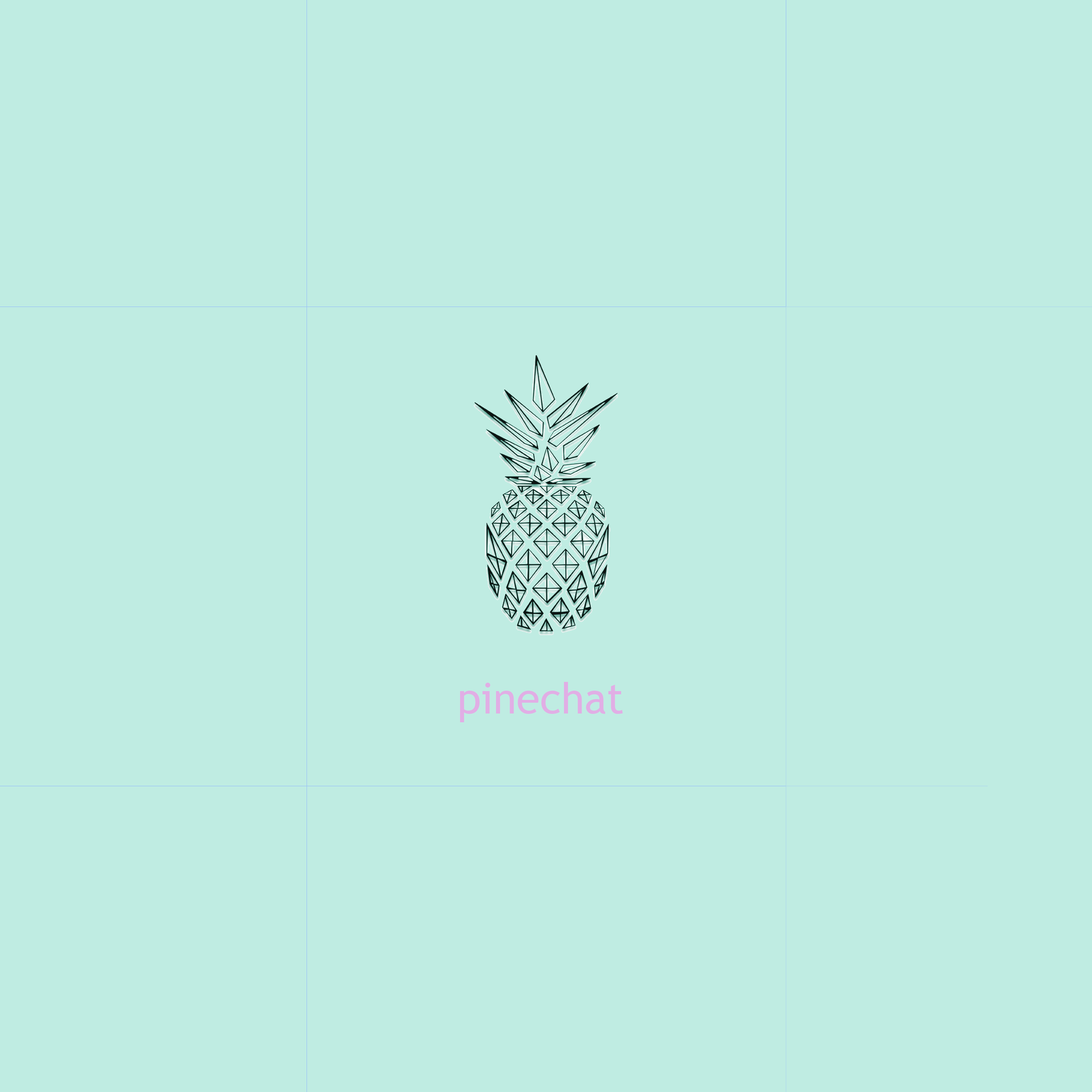
<style>
.page{position:relative;width:1092px;height:1092px;background:#bfece2}
.page>*{position:absolute;margin:0}
.t1{font:42.8px "TrebuchetMS";color:#e1aee5}
</style>
<div class="page">
<p class="t1" style="left:460px;top:682px;width:163px;height:40px">pinechat</p>
</div>
